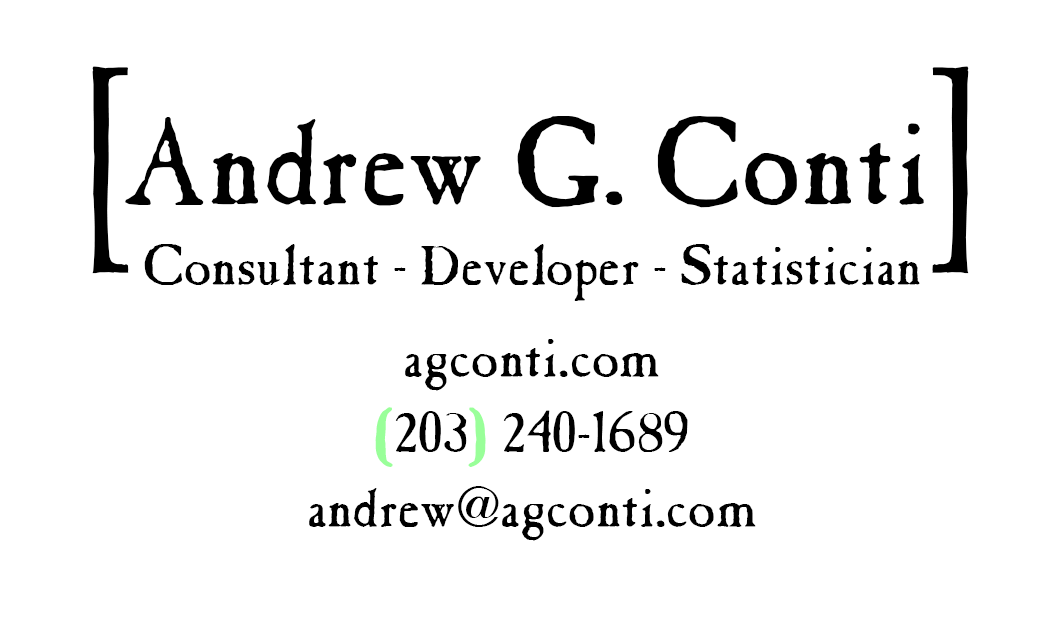
<style>
.page{position:relative;width:1062px;height:624px;background:#ffffff}
.page>*{position:absolute;margin:0}
.t1{font:210px "CaslonAntique";color:#000000;scale:0.71 1}
.t2{font:125px "CaslonAntique";color:#000000}
.t3{font:58.3px/54.2px "CaslonAntique";color:#000000}
.t4{font:58.3px/37.5px "CaslonAntique";color:#000000}
.t5{font:58.3px/37.5px "CaslonAntique";color:#99ff99}
</style>
<div class="page">
<p class="t1" style="left:92px;top:66px;width:37px;height:208px">[</p>
<p class="t1" style="left:932px;top:66px;width:37px;height:208px">]</p>
<p class="t2" style="left:125px;top:116px;width:799px;height:92px">Andrew G. Conti</p>
<p class="t3" style="left:144px;top:244px;width:776px;height:297px;text-align:center">Consultant - Developer - Statistician<br><br><span class="t4">agconti.com<br><br></span><span class="t5">(</span><span class="t4">203</span><span class="t5">)</span><span class="t4"> 240-1689<br><br>andrew@agconti.com</span></p>
</div>
